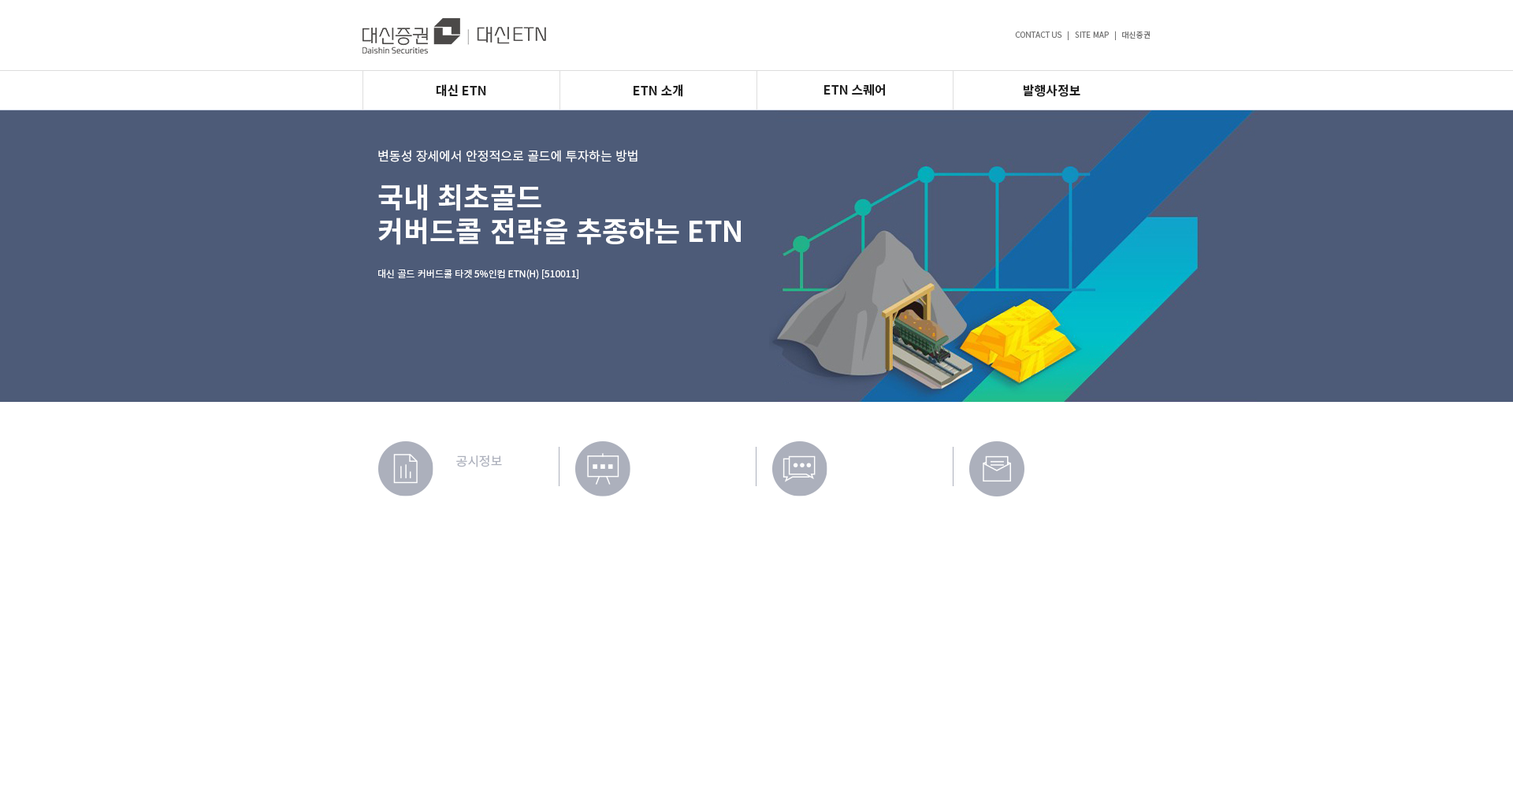
<style>
.page{position:relative;width:1513px;height:788px;background:#ffffff}
.page>*{position:absolute;margin:0}
.t1{font:7.9px "NotoSansKR-Regular";color:#777777}
.t2{font:12.6px "NotoSansKR-Bold";color:#222222}
.t3{font:12.6px "NotoSansKR-Regular";color:#ffffff}
.t4{font:28.4px "NotoSansKR-Bold";color:#ffffff}
.t5{font:9.5px "NotoSansKR-Regular";color:#ffffff}
.t6{font:12.6px "NotoSansKR-Regular";color:#acb0bc}
</style>
<div class="page">
<p class="t1" style="left:1015px;top:31px;width:136px;height:9px">CONTACT US   |   SITE MAP   |   대신증권</p>
<p class="t2" style="left:436px;top:84px;width:50px;height:13px">대신 ETN</p>
<p class="t2" style="left:634px;top:84px;width:49px;height:13px">ETN 소개</p>
<p class="t2" style="left:824px;top:84px;width:61px;height:12px">ETN 스퀘어</p>
<p class="t2" style="left:1023px;top:84px;width:57px;height:13px">발행사정보</p>
<p class="t3" style="left:378px;top:150px;width:260px;height:12px">변동성 장세에서 안정적으로 골드에 투자하는 방법</p>
<p class="t4" style="left:378px;top:184px;width:363px;height:61px">국내 최초골드<br>커버드콜 전략을 추종하는 ETN</p>
<p class="t5" style="left:378px;top:269px;width:200px;height:11px">대신 골드 커버드콜 타겟 5%인컴 ETN(H) [510011]</p>
<p class="t6" style="left:456px;top:455px;width:46px;height:12px">공시정보</p>
</div>
